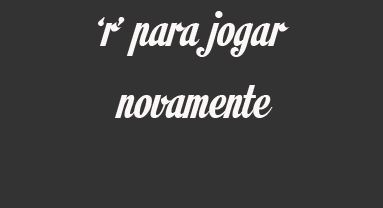
<style>
.page{position:relative;width:383px;height:208px;background:#333333}
.page>*{position:absolute;margin:0}
.t1{font:60px "MotionPicturePersonalUse";color:#fbf7f7}
</style>
<div class="page">
<p class="t1" style="left:98px;top:11px;width:192px;height:107px">‘r’ para jogar               novamente</p>
</div>
